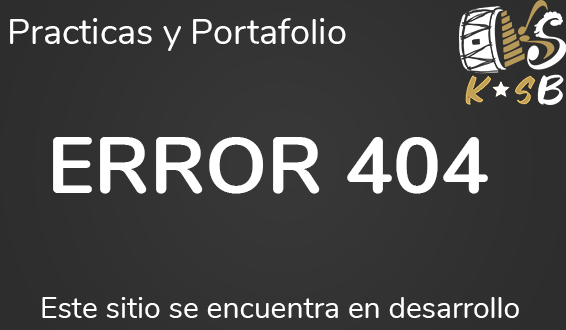
<style>
.page{position:relative;width:566px;height:330px}
.page>*{position:absolute;margin:0}
.t1{font:36px "Nunito-Regular";color:#ffffff}
.t2{font:80px "Nunito-Bold";color:#ffffff}
.t3{font:30px "Nunito-Regular";color:#ffffff}
</style>
<div class="page">
<p class="t1" style="left:10px;top:18px;width:336px;height:33px">Practicas y Portafolio</p>
<p class="t2" style="left:53px;top:137px;width:435px;height:57px">ERROR 404</p>
<p class="t3" style="left:42px;top:297px;width:477px;height:21px">Este sitio se encuentra en desarrollo</p>
</div>
